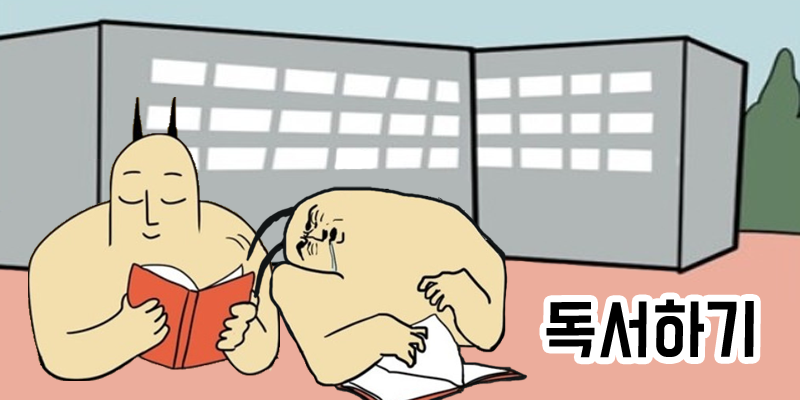
<style>
.page{position:relative;width:800px;height:400px}
.page>*{position:absolute;margin:0}
.t1{font:59px "BMDoHyeon";color:#000000;scale:0.95 1}
</style>
<div class="page">
<p class="t1" style="left:546px;top:299px;width:208px;height:59px">독서하기</p>
</div>
